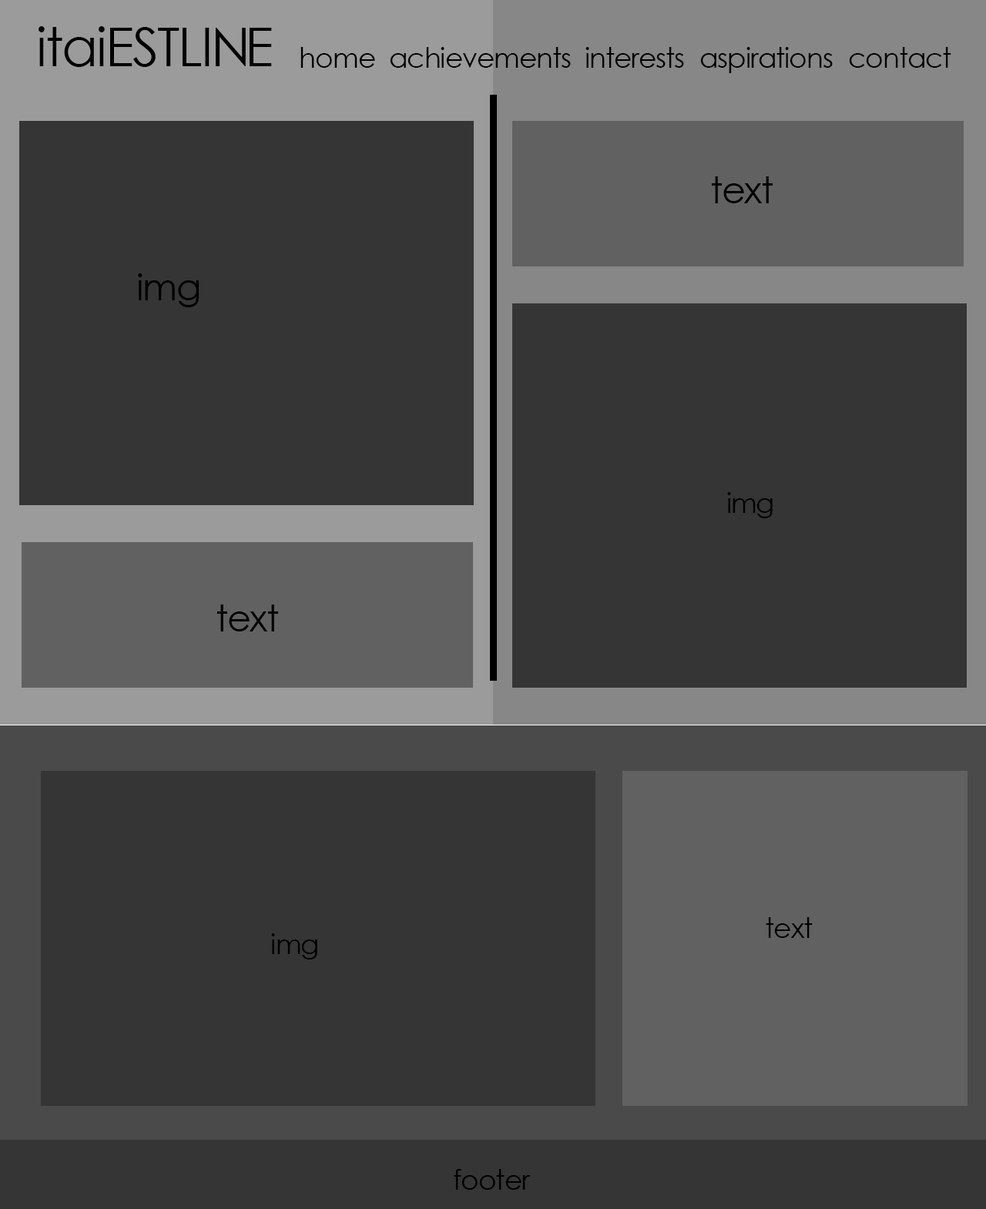
<style>
.page{position:relative;width:986px;height:1209px;background:#353535}
.page>*{position:absolute;margin:0}
.t1{font:53.2px "CenturyGothic";letter-spacing:-0.03em;color:#000000}
.t2{font:27.7px "CenturyGothic";letter-spacing:-0.03em;color:#000000}
.t3{font:37px "CenturyGothic";letter-spacing:-0.03em;color:#000000}
</style>
<div class="page">
<p class="t1" style="left:39px;top:26px;width:233px;height:41px">itaiESTLINE</p>
<p class="t2" style="left:300px;top:47px;width:75px;height:21px">home</p>
<p class="t2" style="left:390px;top:47px;width:181px;height:21px">achievements</p>
<p class="t2" style="left:585px;top:47px;width:99px;height:21px">interests</p>
<p class="t2" style="left:700px;top:47px;width:133px;height:26px">aspirations</p>
<p class="t2" style="left:849px;top:47px;width:102px;height:21px">contact</p>
<p class="t3" style="left:712px;top:176px;width:61px;height:27px">text</p>
<p class="t3" style="left:138px;top:273px;width:61px;height:34px">img</p>
<p class="t2" style="left:727px;top:492px;width:46px;height:26px">img</p>
<p class="t3" style="left:217px;top:605px;width:61px;height:27px">text</p>
<p class="t2" style="left:766px;top:917px;width:47px;height:21px">text</p>
<p class="t2" style="left:271px;top:934px;width:46px;height:26px">img</p>
<p class="t2" style="left:454px;top:1169px;width:77px;height:21px">footer</p>
</div>
